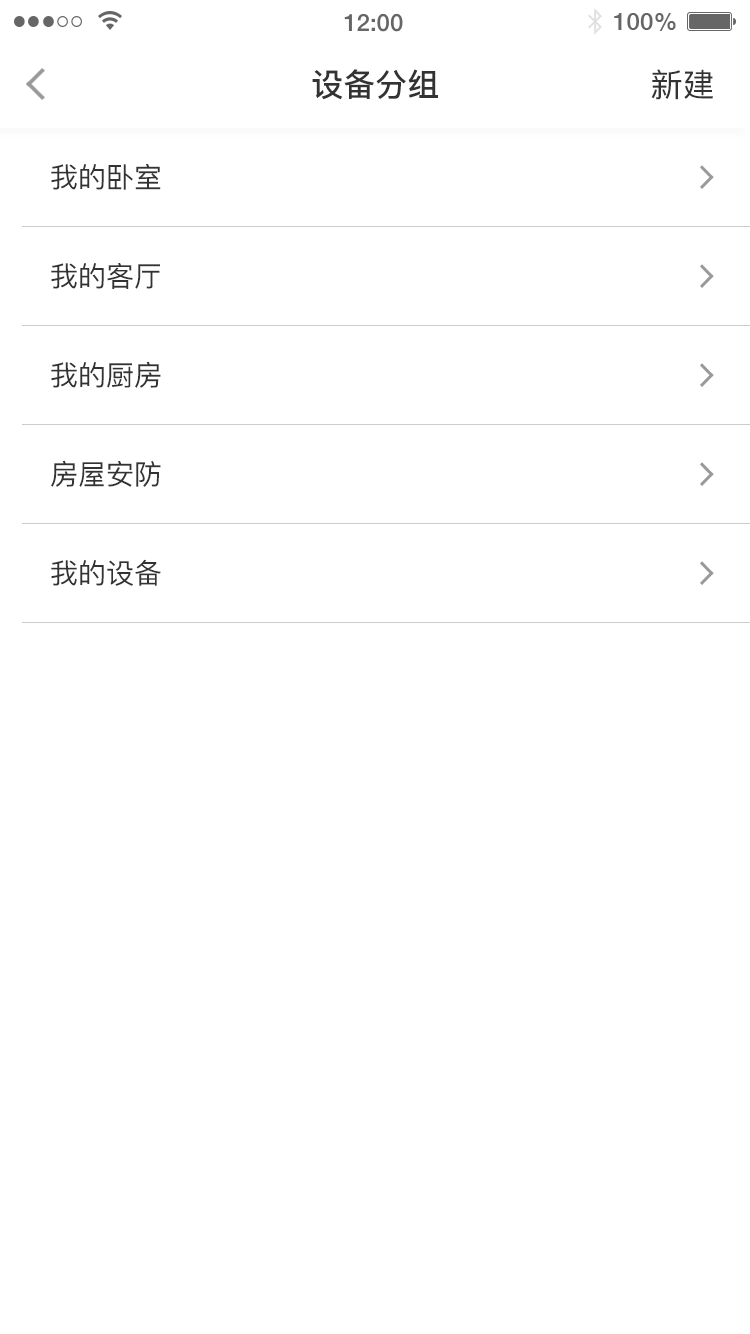
<style>
.page{position:relative;width:750px;height:1334px;background:#ffffff}
.page>*{position:absolute;margin:0}
.t1{font:32px "PingFang-SC-Bold";color:#333333}
.t2{font:32px "PingFang-SC-Medium";color:#333333}
.t3{font:28px "PingFang-SC-Medium";color:#333333}
</style>
<div class="page">
<p class="t1" style="left:312px;top:69px;width:126px;height:31px">设备分组</p>
<p class="t2" style="left:651px;top:69px;width:62px;height:31px">新建</p>
<p class="t3" style="left:51px;top:163px;width:110px;height:27px">我的卧室</p>
<p class="t3" style="left:51px;top:263px;width:109px;height:26px">我的客厅</p>
<p class="t3" style="left:51px;top:361px;width:110px;height:27px">我的厨房</p>
<p class="t3" style="left:51px;top:460px;width:110px;height:27px">房屋安防</p>
<p class="t3" style="left:51px;top:559px;width:110px;height:27px">我的设备</p>
</div>
